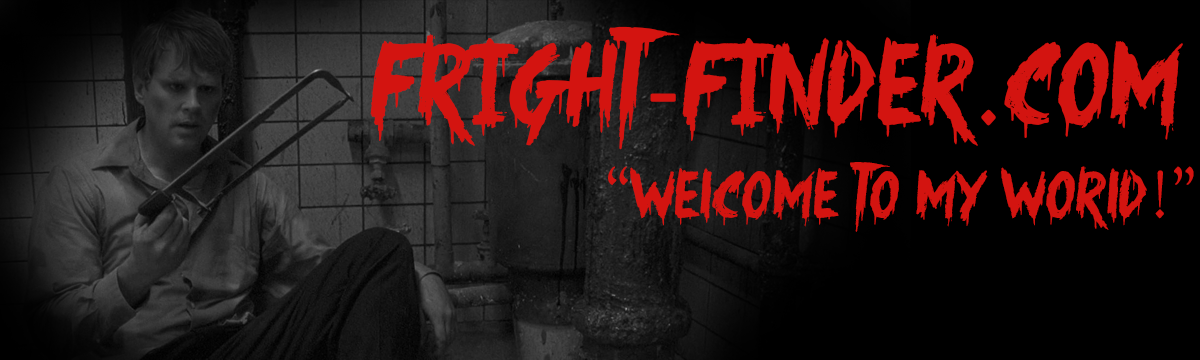
<style>
.page{position:relative;width:1200px;height:360px;background:#000000}
.page>*{position:absolute;margin:0}
.t1{font:116.7px "Something-Strange";color:#d31410}
.t2{font:66.7px "Something-Strange";color:#d31410}
</style>
<div class="page">
<p class="t1" style="left:370px;top:26px;width:813px;height:124px">fRiGHT-FINDER.COM</p>
<p class="t2" style="left:608px;top:162px;width:586px;height:70px">“WeLCOME TO MY WORLD!”</p>
</div>
